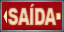
<style>
.page{position:relative;width:64px;height:32px}
.page>*{position:absolute;margin:0}
.t1{font:24.1px "Arial-Black";letter-spacing:-0.05em;color:#ebcea5;scale:0.63 1}
</style>
<div class="page">
<p class="t1" style="left:8px;top:4px;width:49px;height:21px">SAÍDA</p>
</div>
